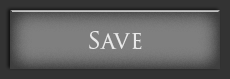
<style>
.page{position:relative;width:230px;height:79px;background:#333333}
.page>*{position:absolute;margin:0}
.t1{font:24px "TrajanPro3-Regular";color:#e9e9e9}
</style>
<div class="page">
<p class="t1" style="left:89px;top:31px;width:53px;height:18px">Save</p>
</div>
